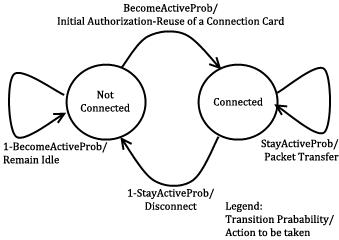
<style>
.page{position:relative;width:339px;height:240px;background:#ffffff}
.page>*{position:absolute;margin:0}
.t1{font:11px "CambriaMath";color:#000000}
</style>
<div class="page">
<p class="t1" style="left:57px;top:3px;width:227px;height:22px;text-align:center">BecomeActiveProb/<br>Initial Authorization-Reuse of a Connection Card</p>
<p class="t1" style="left:80px;top:90px;width:50px;height:22px;text-align:center">Not<br>Connected</p>
<p class="t1" style="left:213px;top:97px;width:50px;height:9px">Connected</p>
<p class="t1" style="left:3px;top:142px;width:105px;height:22px">1-BecomeActiveProb/<br>Remain Idle</p>
<p class="t1" style="left:261px;top:139px;width:78px;height:22px;text-align:right">StayActiveProb/<br>Packet Transfer</p>
<p class="t1" style="left:127px;top:188px;width:87px;height:22px;text-align:center">1-StayActiveProb/<br>Disconnect</p>
<p class="t1" style="left:225px;top:201px;width:109px;height:36px">Legend:<br>Transition Prabability/<br>Action to be taken</p>
</div>
